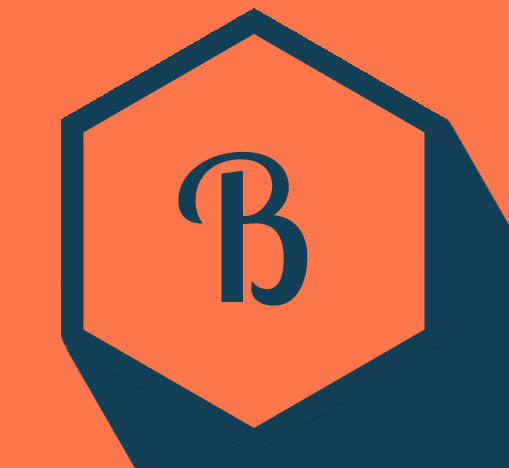
<style>
.page{position:relative;width:509px;height:468px;background:#fe774c}
.page>*{position:absolute;margin:0}
.t1{font:200px "LobsterTwo";color:#133f57}
</style>
<div class="page">
<p class="t1" style="left:178px;top:151px;width:130px;height:155px">B</p>
</div>
